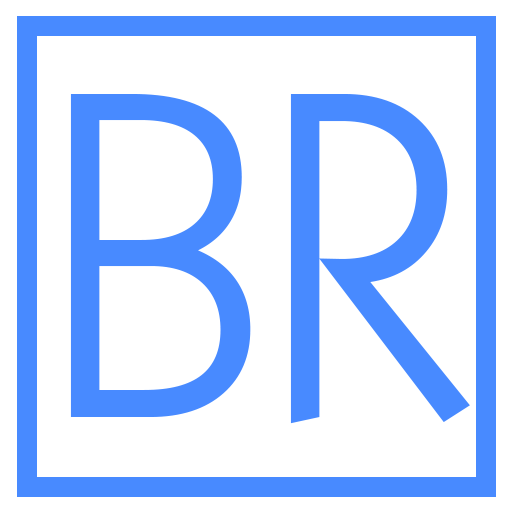
<style>
.page{position:relative;width:512px;height:512px;background:#ffffff}
.page>*{position:absolute;margin:0}
.t1{font:472px "KabelITCbyBT-Book";color:#488aff}
</style>
<div class="page">
<p class="t1" style="left:70px;top:94px;width:400px;height:330px">BR</p>
</div>
